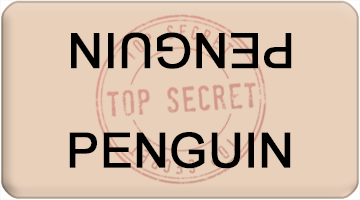
<style>
.page{position:relative;width:360px;height:200px;background:#e8d0bb}
.page>*{position:absolute;margin:0}
.t1{font:48px "ArialMT";color:#000000;font-weight:bold}
</style>
<div class="page">
<p class="t1" style="left:71px;top:32px;width:221px;height:37px;rotate:180deg">PENGUIN</p>
<p class="t1" style="left:69px;top:132px;width:222px;height:37px">PENGUIN</p>
</div>
